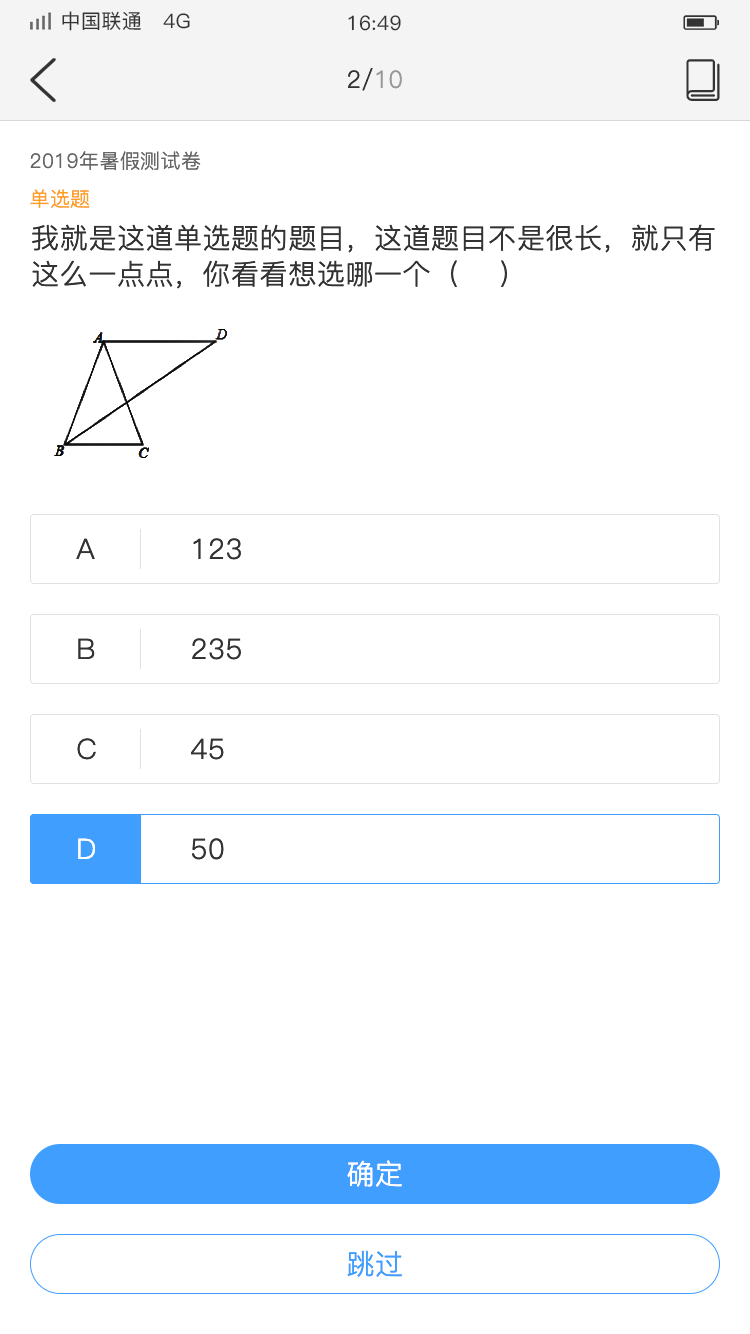
<style>
.page{position:relative;width:750px;height:1334px;background:#ffffff}
.page>*{position:absolute;margin:0}
.t1{font:20px "PingFang-SC-Medium";letter-spacing:0.02em;color:#333333}
.t2{font:24px "PingFang-SC-Regular";letter-spacing:0.02em;color:#333333}
.t3{font:24px "PingFang-SC-Regular";letter-spacing:0.02em;color:#999999}
.t4{font:20px "PingFang-SC-Regular";letter-spacing:0.02em;color:#666666}
.t5{font:20px "PingFang-SC-Regular";letter-spacing:0.02em;color:#ff9e21}
.t6{font:28px/36px "PingFang-SC-Regular";letter-spacing:0.02em;color:#333333}
.t7{font:28px "PingFang-SC-Regular";letter-spacing:0.02em;color:#333333}
.t8{font:28px "PingFang-SC-Regular";letter-spacing:0.02em;color:#ffffff}
.t9{font:28px "PingFang-SC-Regular";letter-spacing:0.02em;color:#409eff}
</style>
<div class="page">
<p class="t1" style="left:62px;top:11px;width:128px;height:20px">中国联通   4G</p>
<p class="t1" style="left:348px;top:15px;width:53px;height:16px">16:49</p>
<p class="t2" style="left:348px;top:68px;width:54px;height:23px">2/<span class="t3">10</span></p>
<p class="t4" style="left:30px;top:151px;width:171px;height:20px">2019年暑假测试卷</p>
<p class="t5" style="left:30px;top:189px;width:60px;height:19px">单选题</p>
<p class="t6" style="left:32px;top:224px;width:683px;height:65px">我就是这道单选题的题目，这道题目不是很长，就只有这么一点点，你看看想选哪一个（    ）</p>
<p class="t7" style="left:76px;top:538px;width:19px;height:21px">A</p>
<p class="t7" style="left:193px;top:538px;width:48px;height:22px">123</p>
<p class="t7" style="left:78px;top:638px;width:17px;height:21px">B</p>
<p class="t7" style="left:192px;top:638px;width:49px;height:22px">235</p>
<p class="t7" style="left:77px;top:738px;width:19px;height:22px">C</p>
<p class="t7" style="left:191px;top:738px;width:33px;height:22px">45</p>
<p class="t8" style="left:78px;top:838px;width:17px;height:21px">D</p>
<p class="t7" style="left:192px;top:838px;width:32px;height:22px">50</p>
<p class="t8" style="left:347px;top:1160px;width:55px;height:27px">确定</p>
<p class="t9" style="left:347px;top:1250px;width:55px;height:27px">跳过</p>
</div>
